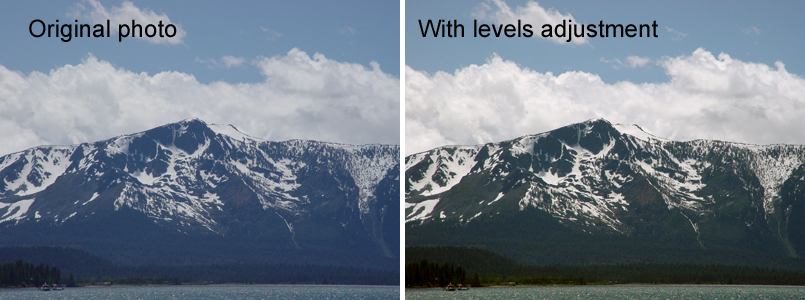
<style>
.page{position:relative;width:805px;height:300px}
.page>*{position:absolute;margin:0}
.t1{font:24px "ArialMT";color:#000000}
</style>
<div class="page">
<p class="t1" style="left:29px;top:19px;width:148px;height:23px">Original photo</p>
<p class="t1" style="left:418px;top:19px;width:240px;height:23px">With levels adjustment</p>
</div>
